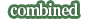
<style>
.page{position:relative;width:90px;height:19px;background:#ffffff}
.page>*{position:absolute;margin:0}
.t1{font:17px "RyuminPro-ExBold";letter-spacing:-0.06em;color:#ffffff}
</style>
<div class="page">
<p class="t1" style="left:10px;top:3px;width:68px;height:13px">combined</p>
<p class="t1" style="left:10px;top:3px;width:68px;height:13px">combined</p>
</div>
